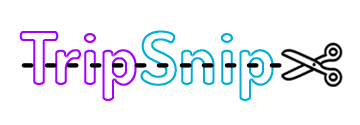
<style>
.page{position:relative;width:360px;height:125px;background:#ffffff}
.page>*{position:absolute;margin:0}
.t1{font:74px "Dosis-ExtraBold"}
</style>
<div class="page">
<p class="t1" style="left:19px;top:30px;width:255px;height:71px">TripSnip</p>
</div>
